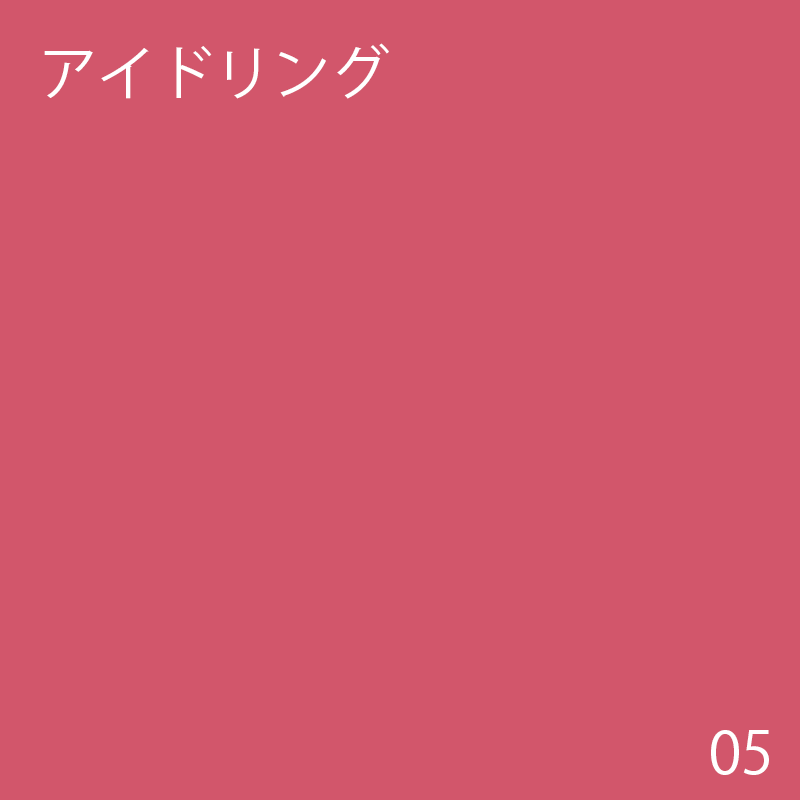
<style>
.page{position:relative;width:800px;height:800px;background:#d2566b}
.page>*{position:absolute;margin:0}
.t1{font:58.3px "KozGoPr6N-Regular";color:#ffffff}
</style>
<div class="page">
<p class="t1" style="left:44px;top:43px;width:345px;height:56px">アイドリング</p>
<p class="t1" style="left:44px;top:43px;width:345px;height:56px">アイドリング</p>
<p class="t1" style="left:44px;top:43px;width:345px;height:56px">アイドリング</p>
<p class="t1" style="left:44px;top:43px;width:345px;height:56px">アイドリング</p>
<p class="t1" style="left:44px;top:43px;width:345px;height:56px">アイドリング</p>
<p class="t1" style="left:44px;top:43px;width:345px;height:56px">アイドリング</p>
<p class="t1" style="left:711px;top:730px;width:58px;height:45px">05</p>
</div>
